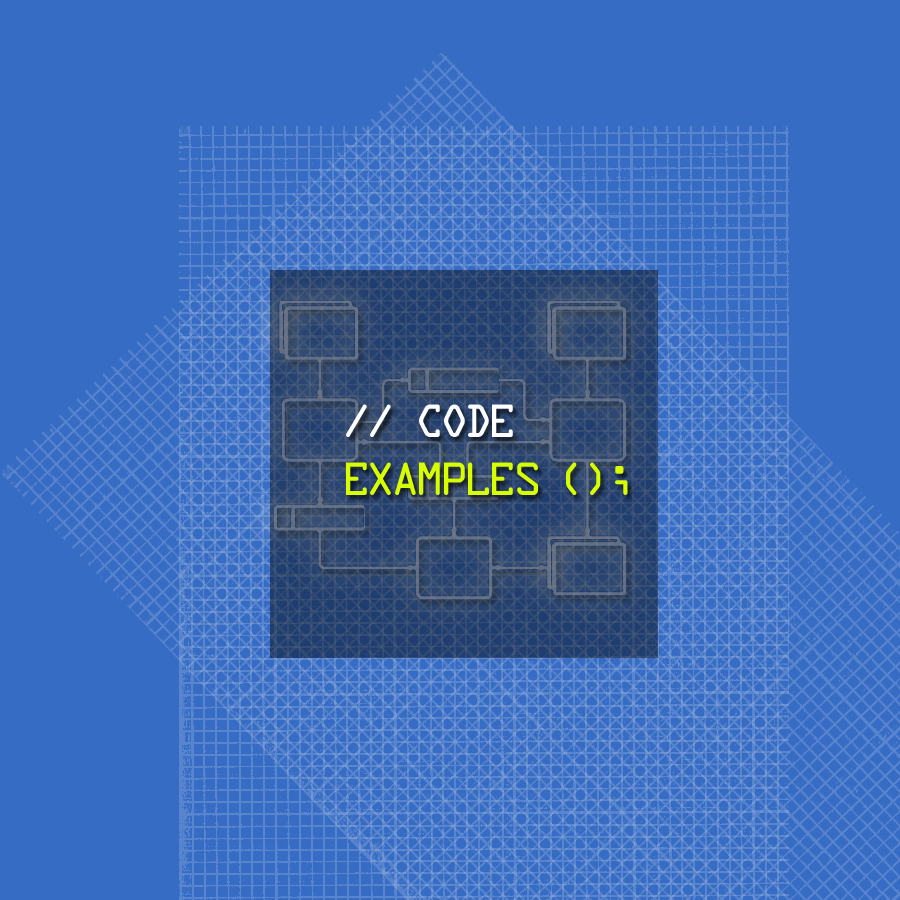
<style>
.page{position:relative;width:900px;height:900px;background:#376cc4}
.page>*{position:absolute;margin:0}
.t1{font:50px "DataControl";color:#ffffff}
.t2{font:50px "DataControl";color:#d8ff00}
</style>
<div class="page">
<p class="t1" style="left:346px;top:404px;width:167px;height:33px">// Code</p>
<p class="t2" style="left:346px;top:462px;width:282px;height:33px">Examples ();</p>
</div>
